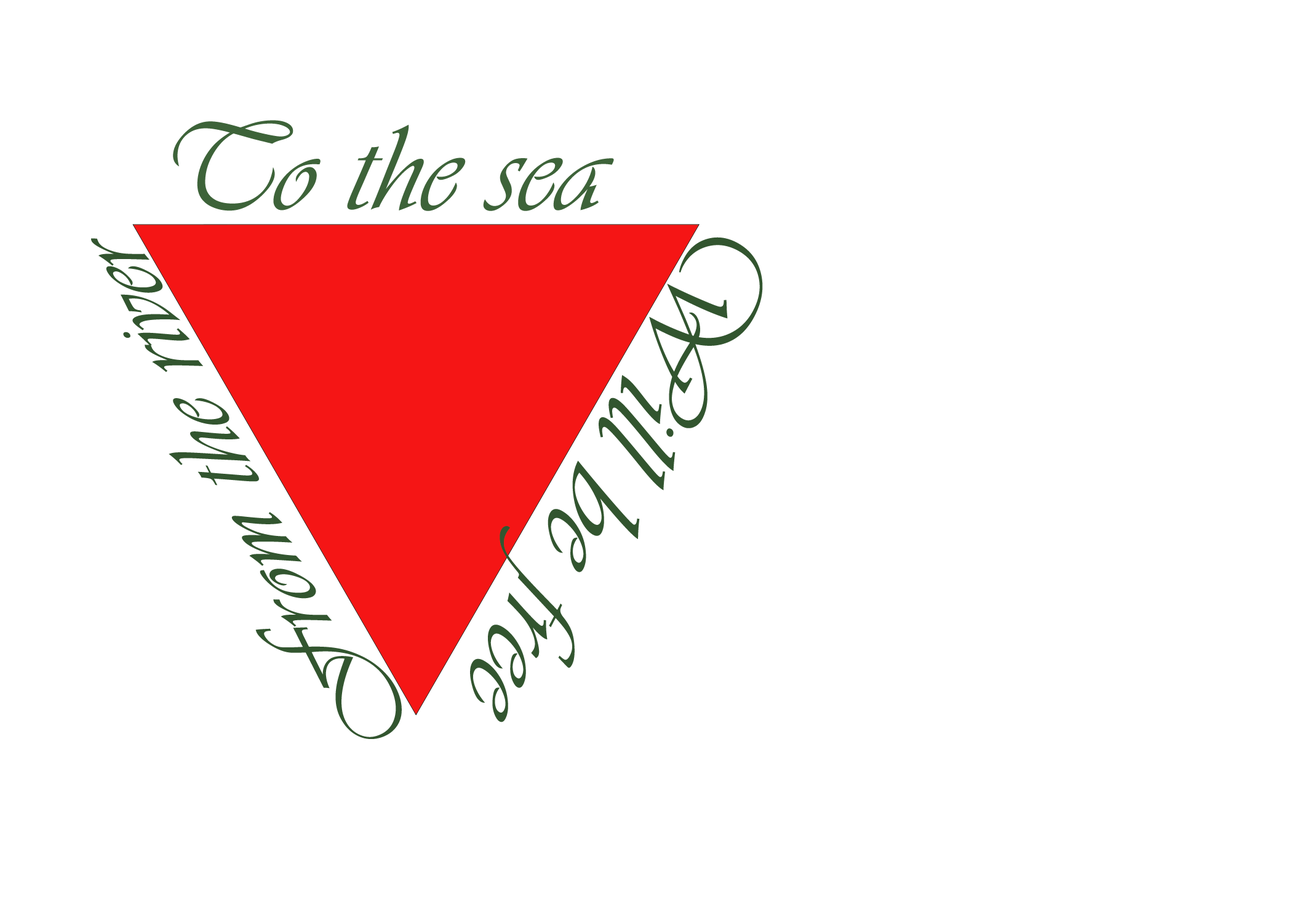
<style>
.page{position:relative;width:1292px;height:923px;background:#ffffff}
.page>*{position:absolute;margin:0}
.t1{font:127.5px "Vivaldii";color:#3d6339}
.t2{font:105.5px "Vivaldii";color:#32552f;scale:1.09 1}
.t3{font:132.9px "Vivaldii";color:#32552f}
</style>
<div class="page">
<p class="t1" style="left:173px;top:120px;width:441px;height:91px">To the sea</p>
<p class="t2" style="left:91px;top:238px;width:311px;height:501px;rotate:-117deg">From the river</p>
<p class="t3" style="left:470px;top:237px;width:293px;height:485px;rotate:117deg">Will be free</p>
</div>
